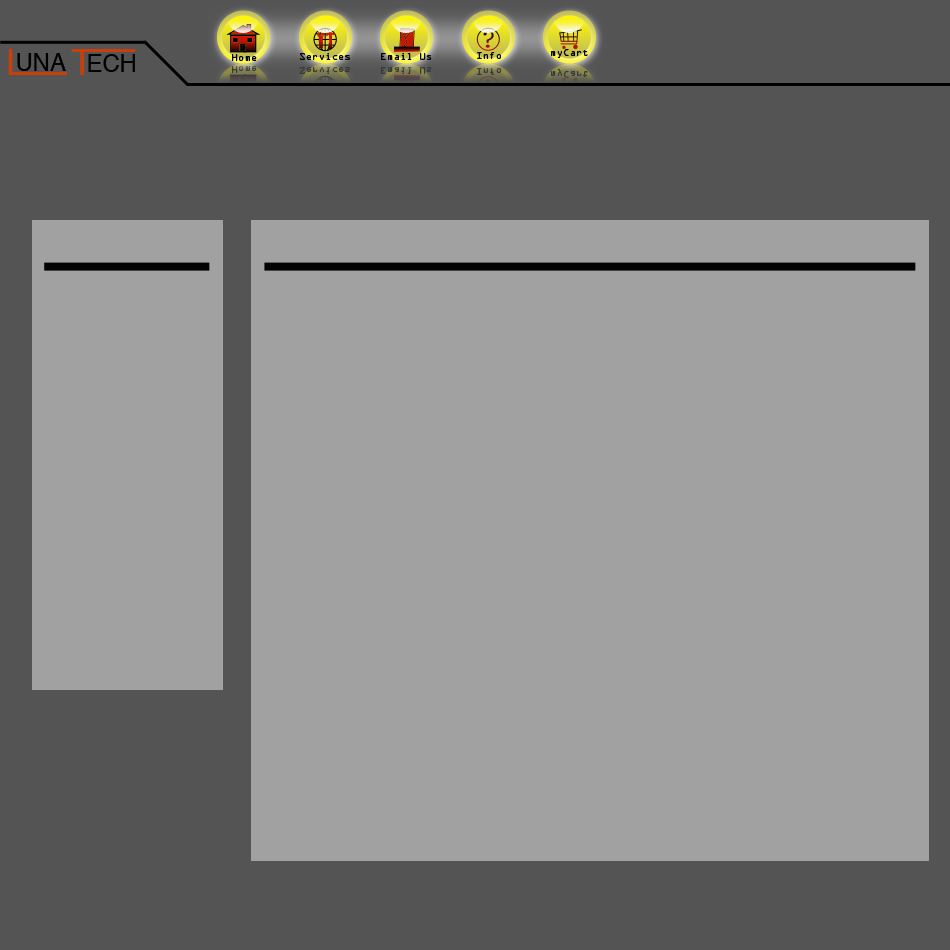
<style>
.page{position:relative;width:950px;height:950px;background:#a1a1a1}
.page>*{position:absolute;margin:0}
.t1{font:9px "OCRAStd";color:#020202}
</style>
<div class="page">
<p class="t1" style="left:232px;top:54px;width:25px;height:7px">Home</p>
<p class="t1" style="left:299px;top:53px;width:51px;height:7px">Services</p>
<p class="t1" style="left:381px;top:53px;width:51px;height:7px">Email Us</p>
<p class="t1" style="left:477px;top:52px;width:24px;height:7px">Inform</p>
<p class="t1" style="left:551px;top:49px;width:37px;height:9px">myCart</p>
</div>
